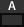
<style>
.page{position:relative;width:24px;height:27px;background:#333333}
.page>*{position:absolute;margin:0}
.t1{font:13.5px "SourceSansPro-SemiBold";color:#ffffff}
</style>
<div class="page">
<p class="t1" style="left:8px;top:1px;width:8px;height:9px">A</p>
</div>
